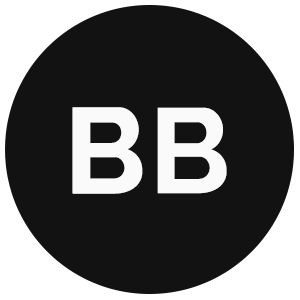
<style>
.page{position:relative;width:300px;height:300px;background:#121212}
.page>*{position:absolute;margin:0}
.t1{font:119.9px "Raleway-Bold";color:#fafafa;font-weight:bold}
</style>
<div class="page">
<p class="t1" style="left:72px;top:107px;width:155px;height:87px">BB</p>
</div>
